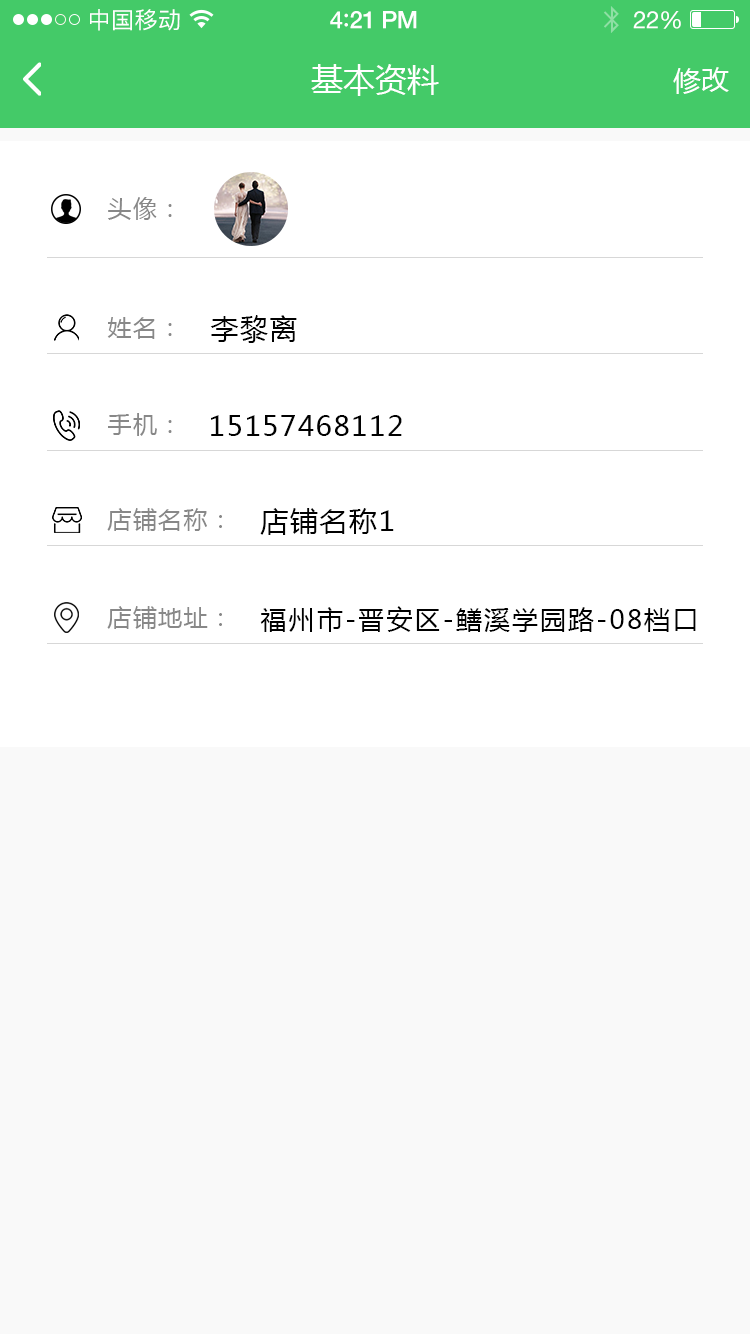
<style>
.page{position:relative;width:750px;height:1334px;background:#f9f9f9}
.page>*{position:absolute;margin:0}
.t1{font:23px "PingFangSC-Regular";letter-spacing:0.02em;color:#ffffff}
.t2{font:24px "HelveticaNeue-Medium";letter-spacing:-0.02em;color:#ffffff}
.t3{font:26px "Avenir-Medium";letter-spacing:-0.02em;color:#ffffff}
.t4{font:24px "HelveticaNeue";letter-spacing:-0.02em;color:#ffffff}
.t5{font:32px "MicrosoftYaHei";color:#ffffff;text-transform:uppercase}
.t6{font:28px "MicrosoftYaHei";color:#ffffff;text-transform:uppercase}
.t7{font:24px "MicrosoftYaHei";letter-spacing:0.05em;color:#888888;text-transform:uppercase}
.t8{font:28px "MicrosoftYaHei";letter-spacing:0.05em;color:#010101;text-transform:uppercase}
.t9{font:26px "MicrosoftYaHei";letter-spacing:0.08em;color:#000000;text-transform:uppercase}
</style>
<div class="page">
<p class="t1" style="left:90px;top:9px;width:90px;height:22px">中国移动</p>
<p class="t2" style="left:330px;top:11px;width:87px;height:18px">4<span class="t3">:</span>21 PM</p>
<p class="t4" style="left:633px;top:11px;width:48px;height:18px">22%</p>
<p class="t5" style="left:311px;top:64px;width:128px;height:32px">基本资料</p>
<p class="t6" style="left:673px;top:67px;width:56px;height:27px">修改</p>
<p class="t7" style="left:108px;top:197px;width:64px;height:23px">头像：</p>
<p class="t7" style="left:107px;top:317px;width:65px;height:22px">姓名：</p>
<p class="t8" style="left:210px;top:315px;width:87px;height:28px">李黎离</p>
<p class="t7" style="left:108px;top:413px;width:64px;height:23px">手机：</p>
<p class="t8" style="left:211px;top:415px;width:191px;height:21px">15157468112</p>
<p class="t7" style="left:107px;top:508px;width:115px;height:23px">店铺名称：</p>
<p class="t8" style="left:260px;top:508px;width:134px;height:27px">店铺名称1</p>
<p class="t7" style="left:107px;top:606px;width:115px;height:23px">店铺地址：</p>
<p class="t9" style="left:260px;top:606px;width:436px;height:26px">福州市-晋安区-鳝溪学园路-08档口</p>
</div>
